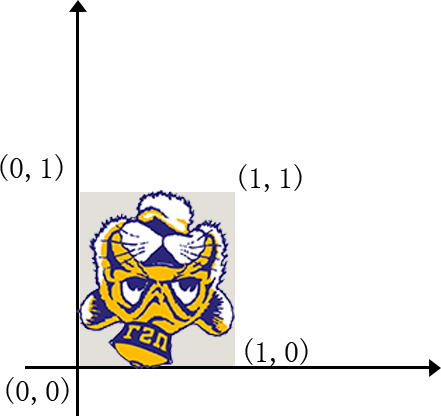
<style>
.page{position:relative;width:441px;height:416px;background:#ffffff}
.page>*{position:absolute;margin:0}
.t1{font:30px "SimSun";color:#000000}
</style>
<div class="page">
<p class="t1" style="left:0px;top:154px;width:63px;height:28px">(0,1)</p>
<p class="t1" style="left:239px;top:164px;width:63px;height:28px">(1,1)</p>
<p class="t1" style="left:245px;top:338px;width:63px;height:28px">(1,0)</p>
<p class="t1" style="left:6px;top:377px;width:63px;height:28px">(0,0)</p>
</div>
